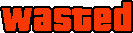
<style>
.page{position:relative;width:133px;height:33px;background:#f83800}
.page>*{position:absolute;margin:0}
.t1{font:36px "PricedownBl-Regular";letter-spacing:0.03em;color:#f83800}
</style>
<div class="page">
<p class="t1" style="left:2px;top:2px;width:129px;height:29px">wasted</p>
</div>
